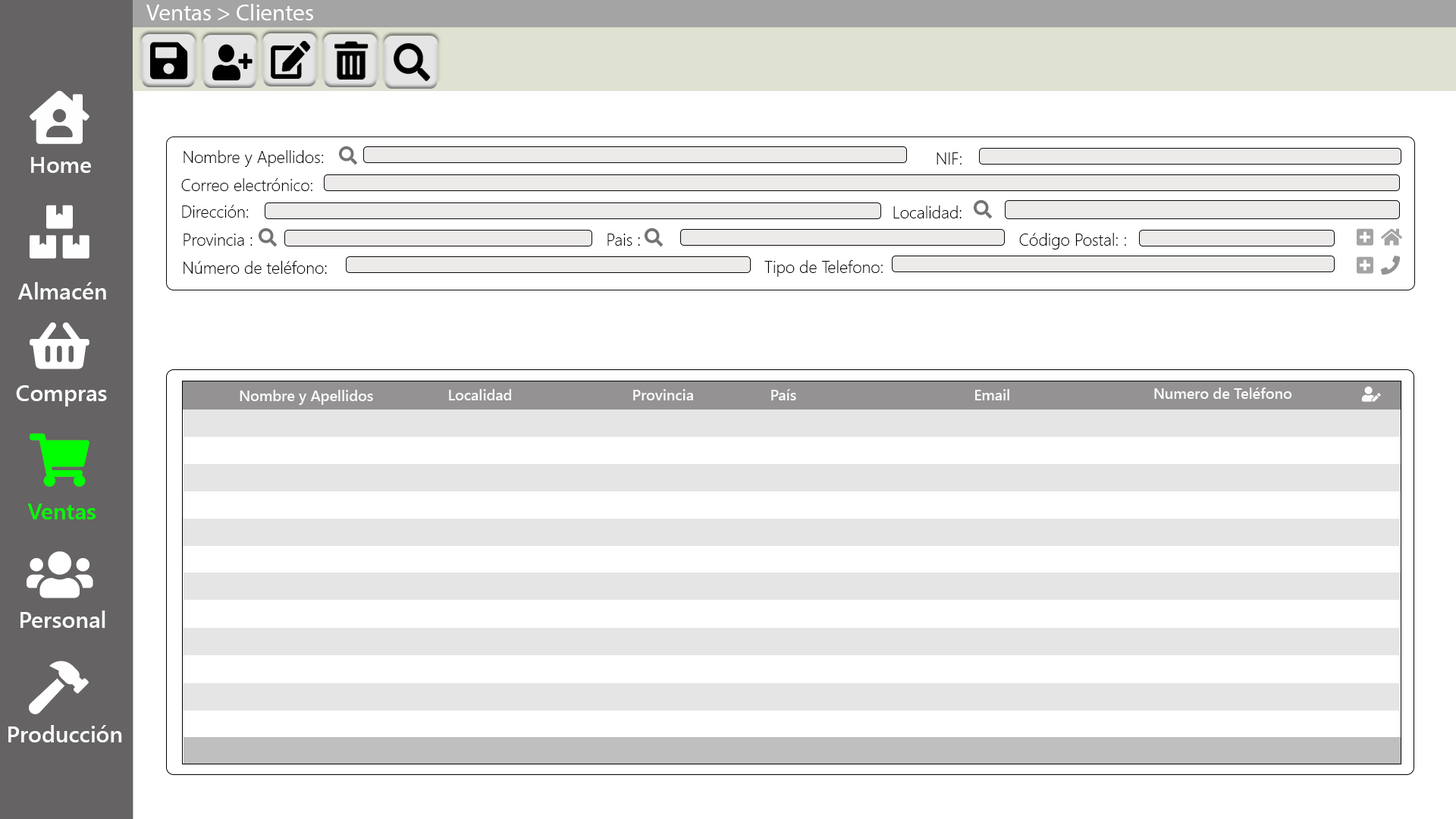
<style>
.page{position:relative;width:1456px;height:819px;background:#ffffff}
.page>*{position:absolute;margin:0}
.t1{font:23.5px "MyriadPro-Regular";color:#ffffff}
.t2{font:22.7px "SegoeUI-Semibold";color:#ffffff}
.t3{font:16.7px "SegoeUI-Light";color:#000000}
.t4{font:14.9px "SegoeUI-Semibold";color:#fbfbfb}
.t5{font:22.7px "SegoeUI-Semibold";color:#00ff00}
.t6{font:22.7px "SegoeUI-Semibold";color:#fefffe}
</style>
<div class="page">
<p class="t1" style="left:146px;top:4px;width:167px;height:16px">Ventas &gt; Clientes</p>
<p class="t2" style="left:31px;top:157px;width:60px;height:16px">Home</p>
<p class="t3" style="left:184px;top:150px;width:140px;height:17px">Nombre y Apellidos:</p>
<p class="t3" style="left:937px;top:152px;width:25px;height:13px">NIF:</p>
<p class="t3" style="left:181px;top:178px;width:131px;height:13px">Correo electrónico:</p>
<p class="t3" style="left:182px;top:205px;width:67px;height:13px">Dirección:</p>
<p class="t3" style="left:893px;top:206px;width:69px;height:12px">Localidad:</p>
<p class="t3" style="left:184px;top:234px;width:69px;height:12px">Provincia :</p>
<p class="t3" style="left:607px;top:234px;width:33px;height:12px">Pais :</p>
<p class="t3" style="left:1019px;top:233px;width:107px;height:16px">Código Postal: :</p>
<p class="t3" style="left:184px;top:261px;width:143px;height:13px">Número de teléfono:</p>
<p class="t3" style="left:764px;top:260px;width:119px;height:17px">Tipo de Telefono:</p>
<p class="t2" style="left:17px;top:282px;width:89px;height:18px">Almacén</p>
<p class="t2" style="left:16px;top:385px;width:91px;height:21px">Compras</p>
<p class="t4" style="left:240px;top:390px;width:133px;height:15px">Nombre y Apellidos</p>
<p class="t4" style="left:449px;top:389px;width:62px;height:11px">Localidad</p>
<p class="t4" style="left:633px;top:389px;width:60px;height:11px">Provincia</p>
<p class="t4" style="left:771px;top:389px;width:25px;height:11px">País</p>
<p class="t4" style="left:975px;top:389px;width:34px;height:11px">Email</p>
<p class="t4" style="left:1154px;top:388px;width:138px;height:11px">Numero de Teléfono</p>
<p class="t5" style="left:27px;top:504px;width:69px;height:15px">Ventas</p>
<p class="t6" style="left:20px;top:610px;width:85px;height:18px">Personal</p>
<p class="t2" style="left:8px;top:725px;width:114px;height:17px">Producción</p>
</div>
